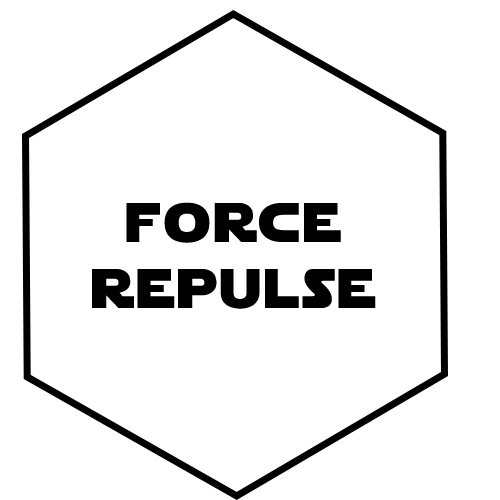
<style>
.page{position:relative;width:500px;height:500px;background:#ffffff}
.page>*{position:absolute;margin:0}
.t1{font:55px "StarJedi";letter-spacing:0.07em;color:#000000}
</style>
<div class="page">
<p class="t1" style="left:92px;top:202px;width:284px;height:107px;text-align:center">force<br>repulse</p>
</div>
